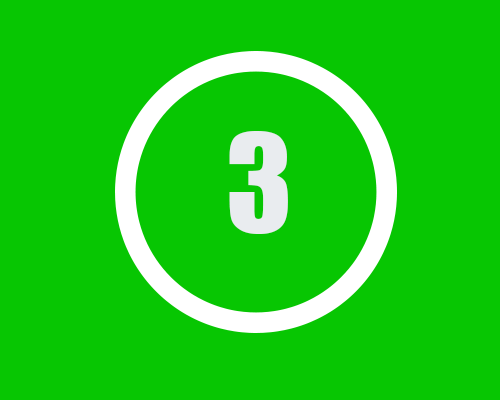
<style>
.page{position:relative;width:500px;height:400px;background:#07c602}
.page>*{position:absolute;margin:0}
.t1{font:125px "Impact";color:#e9ecef}
</style>
<div class="page">
<p class="t1" style="left:229px;top:131px;width:59px;height:103px">3</p>
</div>
